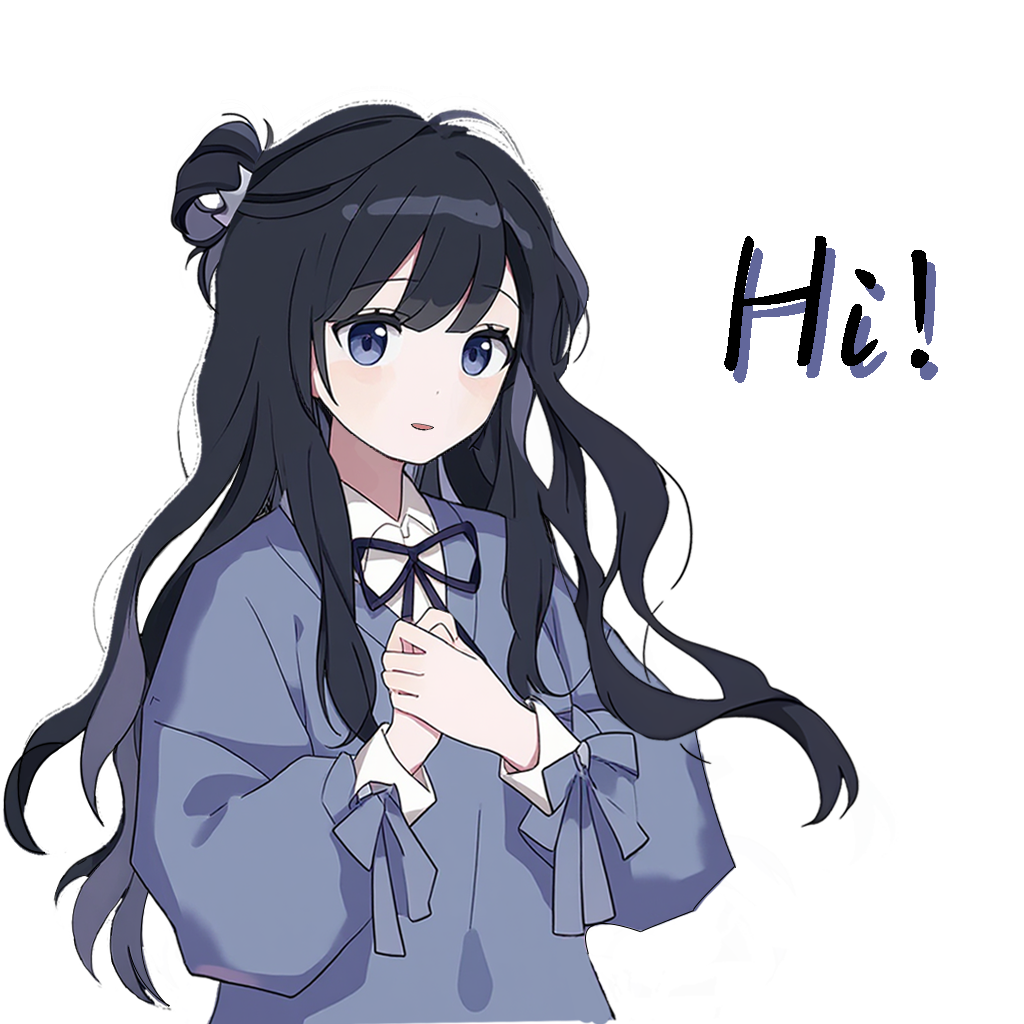
<style>
.page{position:relative;width:1024px;height:1024px;background:#ffffff}
.page>*{position:absolute;margin:0}
.t1{font:209.1px "CMSXTJ";color:#000000}
</style>
<div class="page">
<p class="t1" style="left:724px;top:236px;width:205px;height:135px">Hi!</p>
</div>
